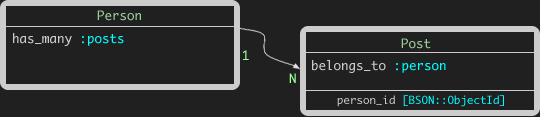
<style>
.page{position:relative;width:540px;height:117px;background:#202020}
.page>*{position:absolute;margin:0}
.t1{font:12.5px "Monaco";color:#99cc99}
.t2{font:12.5px "Monaco";color:#cccccc}
.t3{font:12.5px "Monaco";color:#00ffff}
.t4{font:12.5px "Monaco";color:#99ff99}
.t5{font:10.8px "Monaco";color:#00ffff}
.t6{font:10.8px "Monaco";color:#cccccc}
</style>
<div class="page">
<p class="t1" style="left:97px;top:10px;width:44px;height:11px">Person</p>
<p class="t2" style="left:13px;top:33px;width:111px;height:13px">has_many <span class="t3">:posts</span></p>
<p class="t1" style="left:401px;top:38px;width:30px;height:11px">Post</p>
<p class="t4" style="left:243px;top:50px;width:6px;height:10px">1</p>
<p class="t2" style="left:312px;top:60px;width:134px;height:13px">belongs_to <span class="t3">:person</span></p>
<p class="t4" style="left:289px;top:73px;width:7px;height:10px">N</p>
<p class="t5" style="left:337px;top:95px;width:167px;height:12px"><span class="t6">person_id </span>[BSON::ObjectId]</p>
</div>
